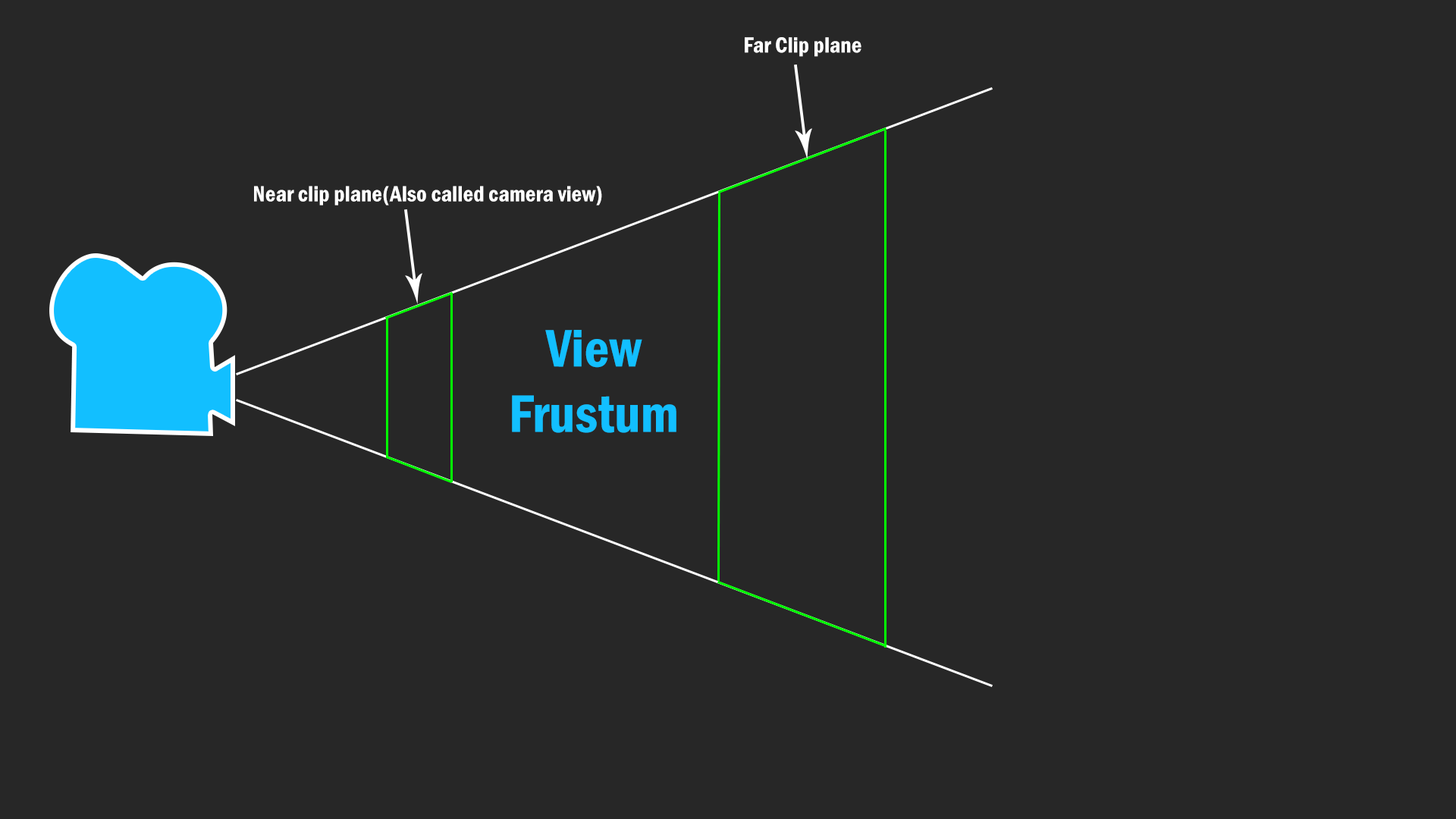
<style>
.page{position:relative;width:1456px;height:819px;background:#272727}
.page>*{position:absolute;margin:0}
.t1{font:22.7px "FranklinGothic-DemiCond";color:#ffffff}
.t2{font:54.6px "FranklinGothic-DemiCond";color:#12bfff}
</style>
<div class="page">
<p class="t1" style="left:745px;top:37px;width:116px;height:20px">Far Clip plane</p>
<p class="t1" style="left:254px;top:186px;width:348px;height:20px">Near clip plane(Also called camera view)</p>
<p class="t2" style="left:512px;top:330px;width:164px;height:103px;text-align:center">View<br>Frustum</p>
</div>
